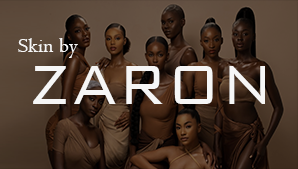
<style>
.page{position:relative;width:298px;height:169px}
.page>*{position:absolute;margin:0}
.t1{font:21.2px "Centaur";letter-spacing:0.01em;color:#f6f6f6}
.t2{font:74.1px "BankGothicBT-Light";letter-spacing:0.01em;color:#f6f6f6;scale:0.85 1}
</style>
<div class="page">
<p class="t1" style="left:18px;top:38px;width:60px;height:20px">Skin by</p>
<p class="t2" style="left:33px;top:66px;width:232px;height:38px">ZARON</p>
</div>
